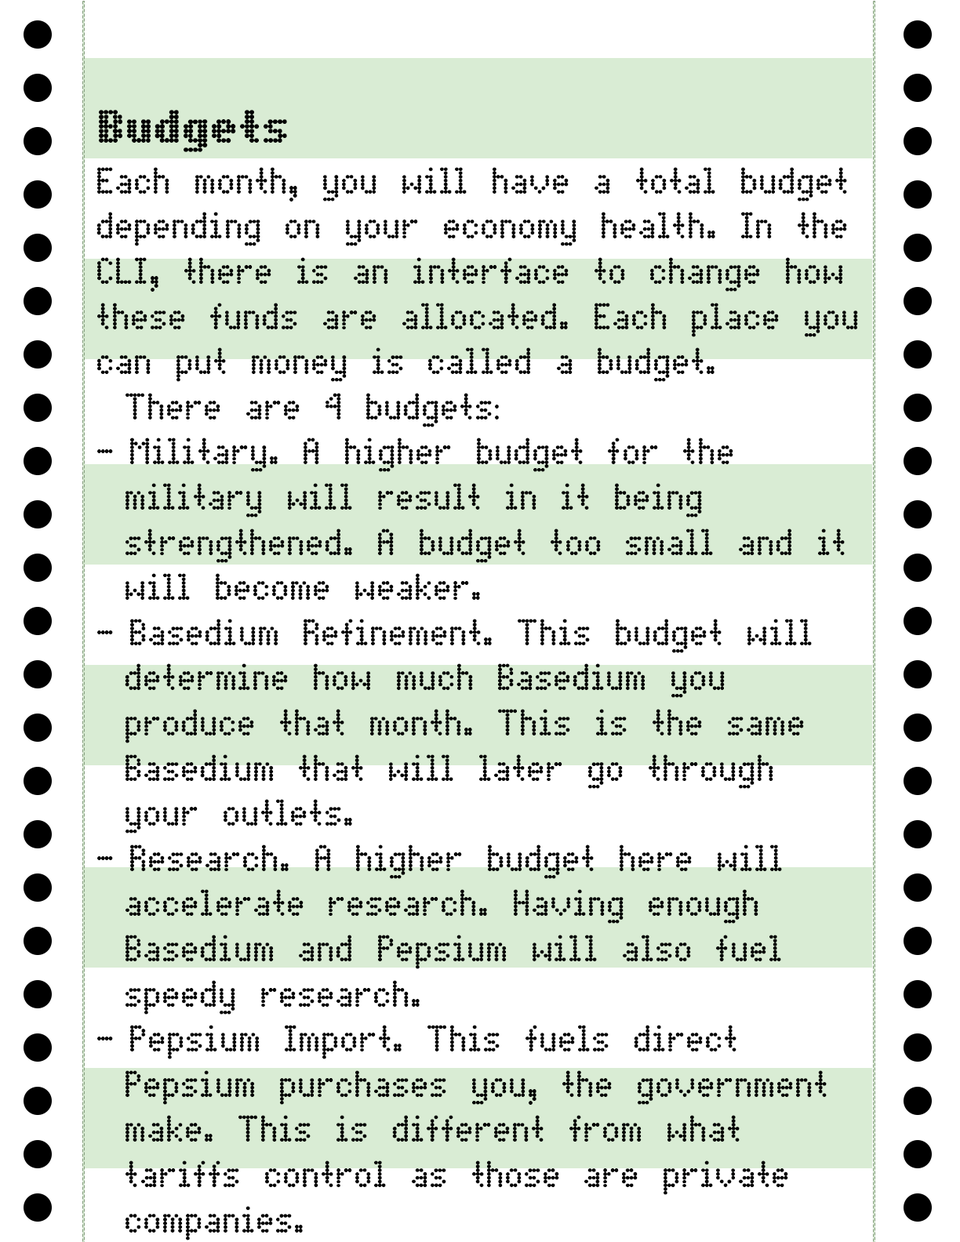
<style>
.page{position:relative;width:960px;height:1242px;background:#ffffff}
.page>*{position:absolute;margin:0}
.t1{font:47.1px "DotMatrixBold";color:#000000}
.t2{font:37.6px "DotMatrix";color:#000000}
</style>
<div class="page">
<p class="t1" style="left:99px;top:110px;width:188px;height:42px">Budgets</p>
<p class="t2" style="left:96px;top:167px;width:762px;height:1074px">Each month, you will have a total budget<br>depending on your economy health. In the<br>CLI, there is an interface to change how<br>these funds are allocated. Each place you<br>can put money is called a budget.<br> There are 4 budgets:<br>Military. A higher budget for the<br> military will result in it being<br> strengthened. A budget too small and it<br> will become weaker.<br>Basedium Refinement. This budget will<br> determine how much Basedium you<br> produce that month. This is the same<br> Basedium that will later go through<br> your outlets.<br>Research. A higher budget here will<br> accelerate research. Having enough<br> Basedium and Pepsium will also fuel<br> speedy research.<br>Pepsium Import. This fuels direct<br> Pepsium purchases you, the government<br> make. This is different from what<br> tariffs control as those are private<br> companies.</p>
</div>
